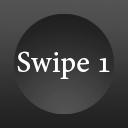
<style>
.page{position:relative;width:128px;height:128px}
.page>*{position:absolute;margin:0}
.t1{font:30px "AdobeHebrew-Regular";color:#ffffff}
</style>
<div class="page">
<p class="t1" style="left:17px;top:51px;width:93px;height:28px">Swipe 1</p>
</div>
